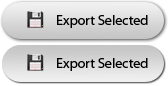
<style>
.page{position:relative;width:168px;height:86px}
.page>*{position:absolute;margin:0}
.t1{font:14px "MyriadPro-Regular";color:#000000}
</style>
<div class="page">
<p class="t1" style="left:57px;top:15px;width:91px;height:13px">Export Selected</p>
<p class="t1" style="left:57px;top:58px;width:91px;height:13px">Export Selected</p>
</div>
